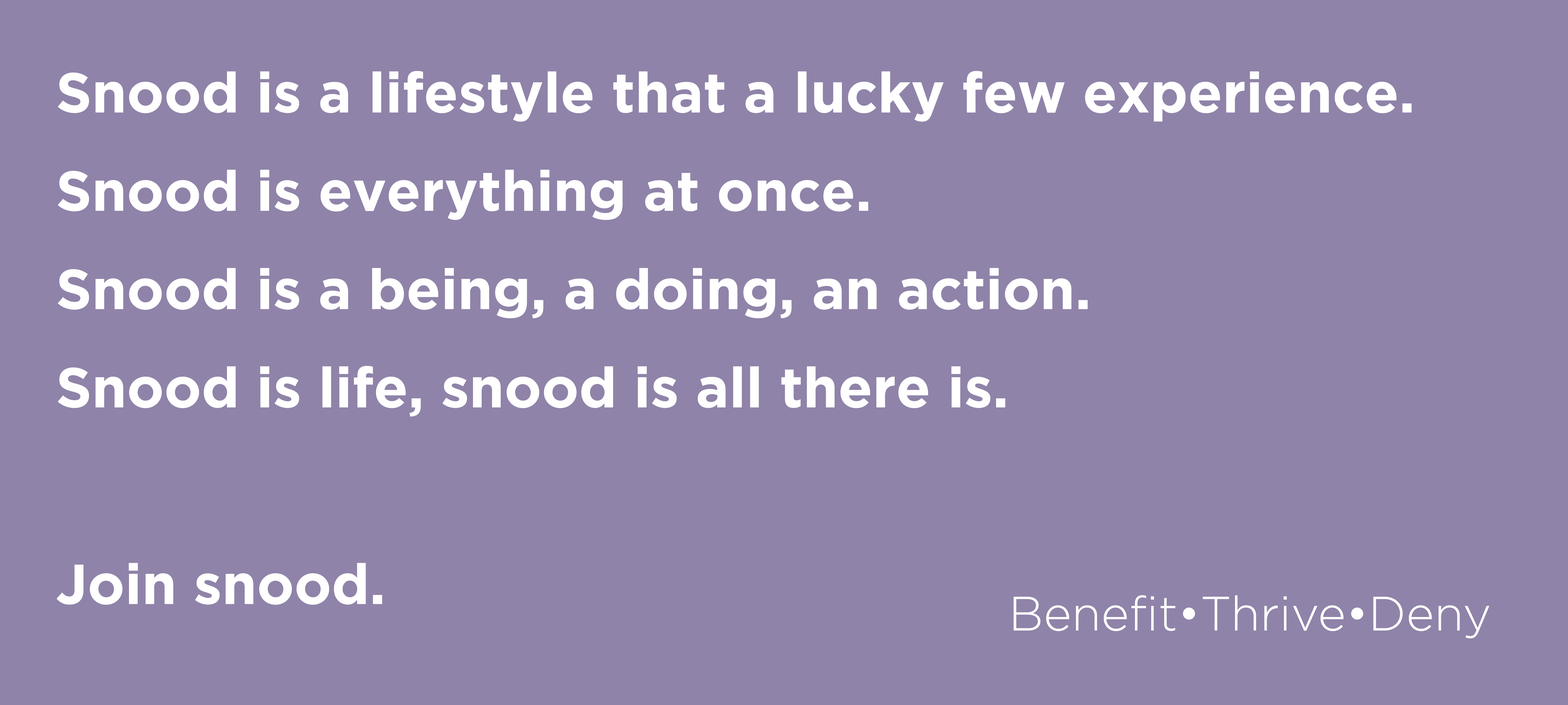
<style>
.page{position:relative;width:1568px;height:705px;background:#8f83a9}
.page>*{position:absolute;margin:0}
.t1{font:56.2px/98.4px "Gotham-Bold";color:#ffffff}
.t2{font:48.1px "Gotham-Light";color:#ffffff}
</style>
<div class="page">
<p class="t1" style="left:56px;top:71px;width:1356px;height:534px">Snood is a lifestyle that a lucky few experience.<br>Snood is everything at once.<br>Snood is a being, a doing, an action.<br>Snood is life, snood is all there is.<br><br>Join snood.</p>
<p class="t2" style="left:1014px;top:595px;width:475px;height:44px">Benefit•Thrive•Deny</p>
</div>
